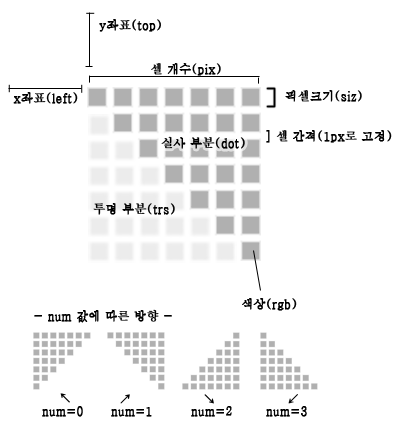
<style>
.page{position:relative;width:406px;height:433px;background:#ffffff}
.page>*{position:absolute;margin:0}
.t1{font:12px "Haansoft-Batang";color:#000000;font-weight:bold}
</style>
<div class="page">
<p class="t1" style="left:99px;top:19px;width:62px;height:13px">y좌표(top)</p>
<p class="t1" style="left:151px;top:63px;width:70px;height:13px">셀 개수(pix)</p>
<p class="t1" style="left:13px;top:92px;width:65px;height:12px">x좌표(left)</p>
<p class="t1" style="left:285px;top:90px;width:77px;height:12px">픽셀크기(siz)</p>
<p class="t1" style="left:161px;top:136px;width:84px;height:13px">실사 부분(dot)</p>
<p class="t1" style="left:266px;top:130px;width:126px;height:13px">] 셀 간격(1px로 고정)</p>
<p class="t1" style="left:93px;top:203px;width:82px;height:12px">투명 부분(trs)</p>
<p class="t1" style="left:242px;top:298px;width:55px;height:13px">색상(rgb)</p>
<p class="t1" style="left:34px;top:309px;width:138px;height:14px">- num 값에 따른 방향 -</p>
<p class="t1" style="left:60px;top:393px;width:10px;height:10px">↖</p>
<p class="t1" style="left:120px;top:394px;width:10px;height:10px">↗</p>
<p class="t1" style="left:204px;top:394px;width:10px;height:10px">↘</p>
<p class="t1" style="left:288px;top:394px;width:10px;height:10px">↙</p>
<p class="t1" style="left:42px;top:406px;width:41px;height:11px">num=0</p>
<p class="t1" style="left:111px;top:407px;width:41px;height:10px">num=1</p>
<p class="t1" style="left:191px;top:406px;width:41px;height:11px">num=2</p>
<p class="t1" style="left:266px;top:406px;width:41px;height:11px">num=3</p>
</div>
